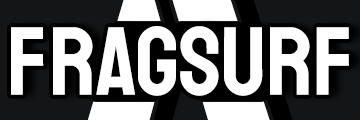
<style>
.page{position:relative;width:360px;height:120px;background:#ffffff}
.page>*{position:absolute;margin:0}
.t1{font:97.2px "Staatliches-Regular";color:#ffffff;text-transform:uppercase}
</style>
<div class="page">
<p class="t1" style="left:11px;top:26px;width:338px;height:70px">fragsurf</p>
</div>
